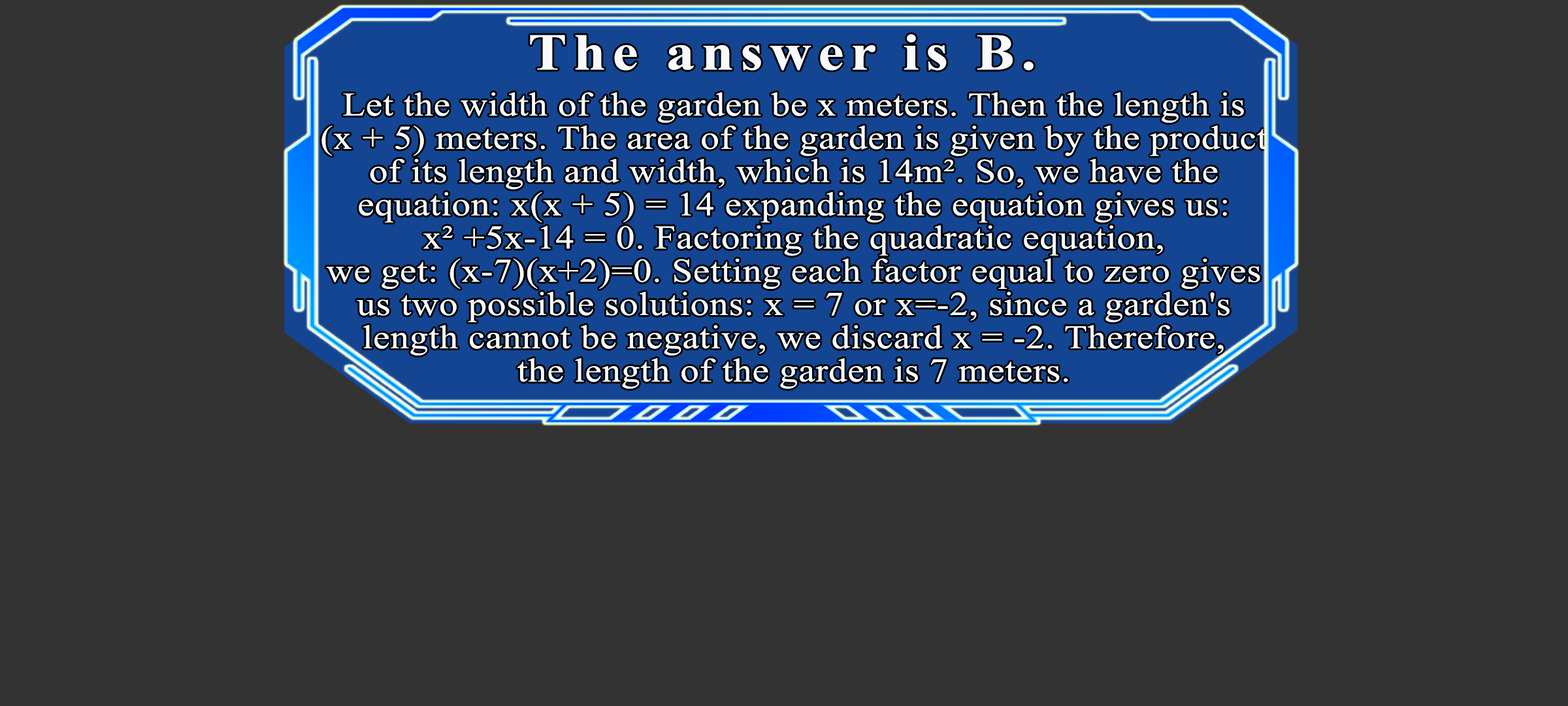
<style>
.page{position:relative;width:1568px;height:706px;background:#333333}
.page>*{position:absolute;margin:0}
.t1{font:51.7px "TimesNewRomanPS-BoldMT";letter-spacing:0.115em;color:#f7f9fb;scale:1.12 1}
.t2{font:33.2px/33.2px "TimesNewRomanPSMT";letter-spacing:0.015em;color:#f7f9fb;scale:1.12 1}
</style>
<div class="page">
<p class="t1" style="left:530px;top:34px;width:504px;height:37px">The answer is B.</p>
<p class="t2" style="left:321px;top:92px;width:946px;height:297px;text-align:center">Let the width of the garden be x meters. Then the length is<br>(x + 5) meters. The area of the garden is given by the product<br>of its length and width, which is 14m². So, we have the<br>equation: x(x + 5) = 14 expanding the equation gives us:<br>x² +5x-14 = 0. Factoring the quadratic equation,<br>we get: (x-7)(x+2)=0. Setting each factor equal to zero gives<br>us two possible solutions: x = 7 or x=-2, since a garden's<br>length cannot be negative, we discard x = -2. Therefore,<br>the length of the garden is 7 meters.</p>
</div>
